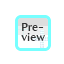
<style>
.page{position:relative;width:64px;height:64px;background:#ffffff}
.page>*{position:absolute;margin:0}
.t1{font:12px/9.6px "AmiraParadiso";color:#333333}
</style>
<div class="page">
<p class="t1" style="left:21px;top:23px;width:24px;height:18px">Pre-<br>view</p>
</div>
